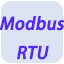
<style>
.page{position:relative;width:64px;height:64px;background:#dce4f4}
.page>*{position:absolute;margin:0}
.t1{font:16.7px "AdobeHeitiStd-Regular";color:#5429f4;font-weight:bold;font-style:italic}
</style>
<div class="page">
<p class="t1" style="left:0px;top:16px;width:65px;height:44px">Modbus <br>    RTU</p>
</div>
